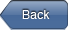
<style>
.page{position:relative;width:68px;height:30px}
.page>*{position:absolute;margin:0}
.t1{font:12px "Helvetica";letter-spacing:0.025em;color:#ffffff}
</style>
<div class="page">
<p class="t1" style="left:22px;top:10px;width:28px;height:9px">Back</p>
</div>
